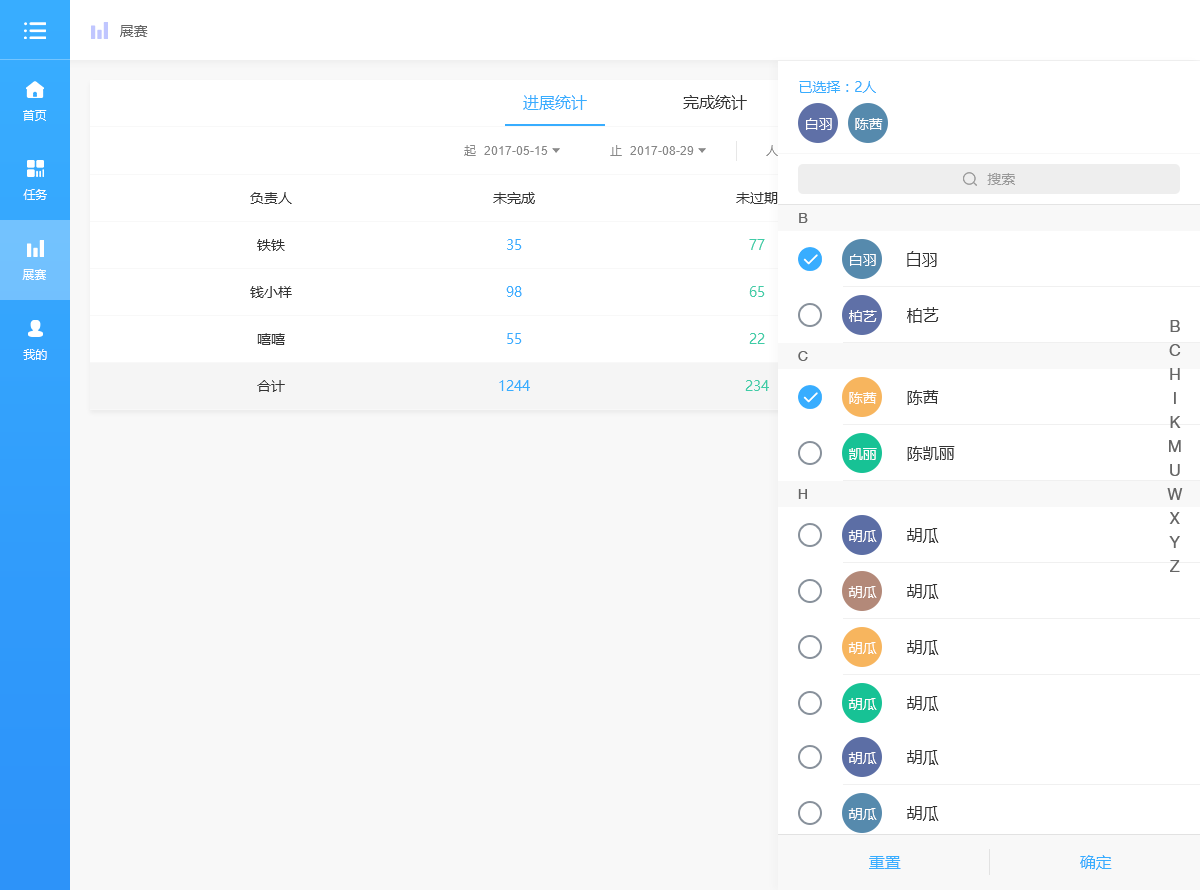
<style>
.page{position:relative;width:1200px;height:890px;background:#ffffff}
.page>*{position:absolute;margin:0}
.t1{font:14px "MicrosoftYaHei";color:#666666}
.t2{font:14px "MicrosoftYaHei";color:#38adff}
.t3{font:16px "MicrosoftYaHei";color:#38adff}
.t4{font:16px "MicrosoftYaHei";color:#333333}
.t5{font:12px "MicrosoftYaHei";color:#ffffff}
.t6{font:14px "MicrosoftYaHei";color:#fffefe}
.t7{font:12px "MicrosoftYaHei";color:#888888}
.t8{font:12px "ArialMT";color:#888888}
.t9{font:14px "MicrosoftYaHei";color:#999999}
.t10{font:14px "MicrosoftYaHei";color:#333333}
.t11{font:14px "HelveticaNeueLTPro-Roman";color:#666666}
.t12{font:14px "MicrosoftYaHei";color:#3fcca7}
.t13{font:16px/24px "HelveticaNeueLTPro-Roman";color:#666666}
</style>
<div class="page">
<p class="t1" style="left:120px;top:25px;width:28px;height:12px">展赛</p>
<p class="t2" style="left:799px;top:81px;width:77px;height:12px">已选择：2人</p>
<p class="t3" style="left:523px;top:95px;width:64px;height:15px">进展统计</p>
<p class="t4" style="left:683px;top:95px;width:64px;height:15px">完成统计</p>
<p class="t5" style="left:23px;top:110px;width:24px;height:11px">首页</p>
<p class="t6" style="left:806px;top:118px;width:26px;height:12px">白羽</p>
<p class="t6" style="left:855px;top:118px;width:28px;height:12px">陈茜</p>
<p class="t7" style="left:464px;top:145px;width:12px;height:11px">起</p>
<p class="t8" style="left:484px;top:146px;width:64px;height:9px">2017-05-15</p>
<p class="t7" style="left:610px;top:145px;width:12px;height:11px">止</p>
<p class="t8" style="left:630px;top:146px;width:64px;height:9px">2017-08-29</p>
<p class="t5" style="left:766px;top:145px;width:24px;height:11px">人员</p>
<p class="t9" style="left:987px;top:173px;width:28px;height:12px">搜索</p>
<p class="t5" style="left:23px;top:189px;width:24px;height:11px">任务</p>
<p class="t10" style="left:250px;top:192px;width:42px;height:12px">负责人</p>
<p class="t10" style="left:493px;top:192px;width:42px;height:12px">未完成</p>
<p class="t10" style="left:736px;top:192px;width:42px;height:12px">未过期</p>
<p class="t11" style="left:799px;top:213px;width:9px;height:10px">B</p>
<p class="t10" style="left:257px;top:239px;width:28px;height:12px">铁铁</p>
<p class="t2" style="left:507px;top:239px;width:15px;height:11px">35</p>
<p class="t12" style="left:749px;top:239px;width:16px;height:11px">77</p>
<p class="t6" style="left:850px;top:254px;width:26px;height:12px">白羽</p>
<p class="t4" style="left:907px;top:251px;width:30px;height:16px">白羽</p>
<p class="t5" style="left:22px;top:269px;width:24px;height:11px">展赛</p>
<p class="t10" style="left:250px;top:286px;width:42px;height:12px">钱小样</p>
<p class="t2" style="left:506px;top:286px;width:16px;height:11px">98</p>
<p class="t12" style="left:749px;top:286px;width:16px;height:11px">65</p>
<p class="t6" style="left:849px;top:310px;width:28px;height:12px">柏艺</p>
<p class="t4" style="left:907px;top:307px;width:32px;height:16px">柏艺</p>
<p class="t13" style="left:1167px;top:320px;width:16px;height:252px;text-align:center">B<br>C<br>H<br>I<br>K<br>M<br>U<br>W<br>X<br>Y<br>Z</p>
<p class="t10" style="left:257px;top:333px;width:28px;height:12px">嘻嘻</p>
<p class="t2" style="left:507px;top:333px;width:15px;height:11px">55</p>
<p class="t12" style="left:749px;top:333px;width:16px;height:11px">22</p>
<p class="t5" style="left:23px;top:349px;width:24px;height:11px">我的</p>
<p class="t11" style="left:798px;top:351px;width:10px;height:10px">C</p>
<p class="t10" style="left:257px;top:380px;width:28px;height:12px">合计</p>
<p class="t2" style="left:499px;top:380px;width:31px;height:11px">1244</p>
<p class="t12" style="left:745px;top:380px;width:24px;height:11px">234</p>
<p class="t4" style="left:907px;top:390px;width:32px;height:15px">陈茜</p>
<p class="t6" style="left:849px;top:392px;width:28px;height:12px">陈茜</p>
<p class="t6" style="left:849px;top:448px;width:28px;height:12px">凯丽</p>
<p class="t4" style="left:907px;top:446px;width:48px;height:15px">陈凯丽</p>
<p class="t11" style="left:798px;top:489px;width:9px;height:10px">H</p>
<p class="t6" style="left:848px;top:530px;width:29px;height:12px">胡瓜</p>
<p class="t4" style="left:907px;top:528px;width:32px;height:15px">胡瓜</p>
<p class="t6" style="left:848px;top:586px;width:29px;height:12px">胡瓜</p>
<p class="t4" style="left:907px;top:584px;width:32px;height:15px">胡瓜</p>
<p class="t4" style="left:907px;top:640px;width:32px;height:15px">胡瓜</p>
<p class="t6" style="left:848px;top:642px;width:29px;height:12px">胡瓜</p>
<p class="t6" style="left:848px;top:698px;width:29px;height:12px">胡瓜</p>
<p class="t4" style="left:907px;top:696px;width:32px;height:15px">胡瓜</p>
<p class="t4" style="left:907px;top:750px;width:32px;height:15px">胡瓜</p>
<p class="t6" style="left:848px;top:752px;width:29px;height:12px">胡瓜</p>
<p class="t6" style="left:848px;top:808px;width:29px;height:12px">胡瓜</p>
<p class="t4" style="left:907px;top:806px;width:32px;height:15px">胡瓜</p>
<p class="t3" style="left:869px;top:856px;width:32px;height:13px">重置</p>
<p class="t3" style="left:1080px;top:855px;width:32px;height:15px">确定</p>
</div>
